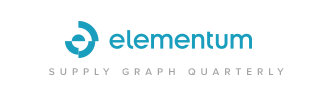
<style>
.page{position:relative;width:333px;height:100px;background:#ffffff}
.page>*{position:absolute;margin:0}
.t1{font:10px "ProximaNova-Semibold";letter-spacing:0.5em;color:#a6a5a5}
</style>
<div class="page">
<p class="t1" style="left:49px;top:68px;width:235px;height:8px">SUPPLY GRAPH QUARTERLY</p>
</div>
